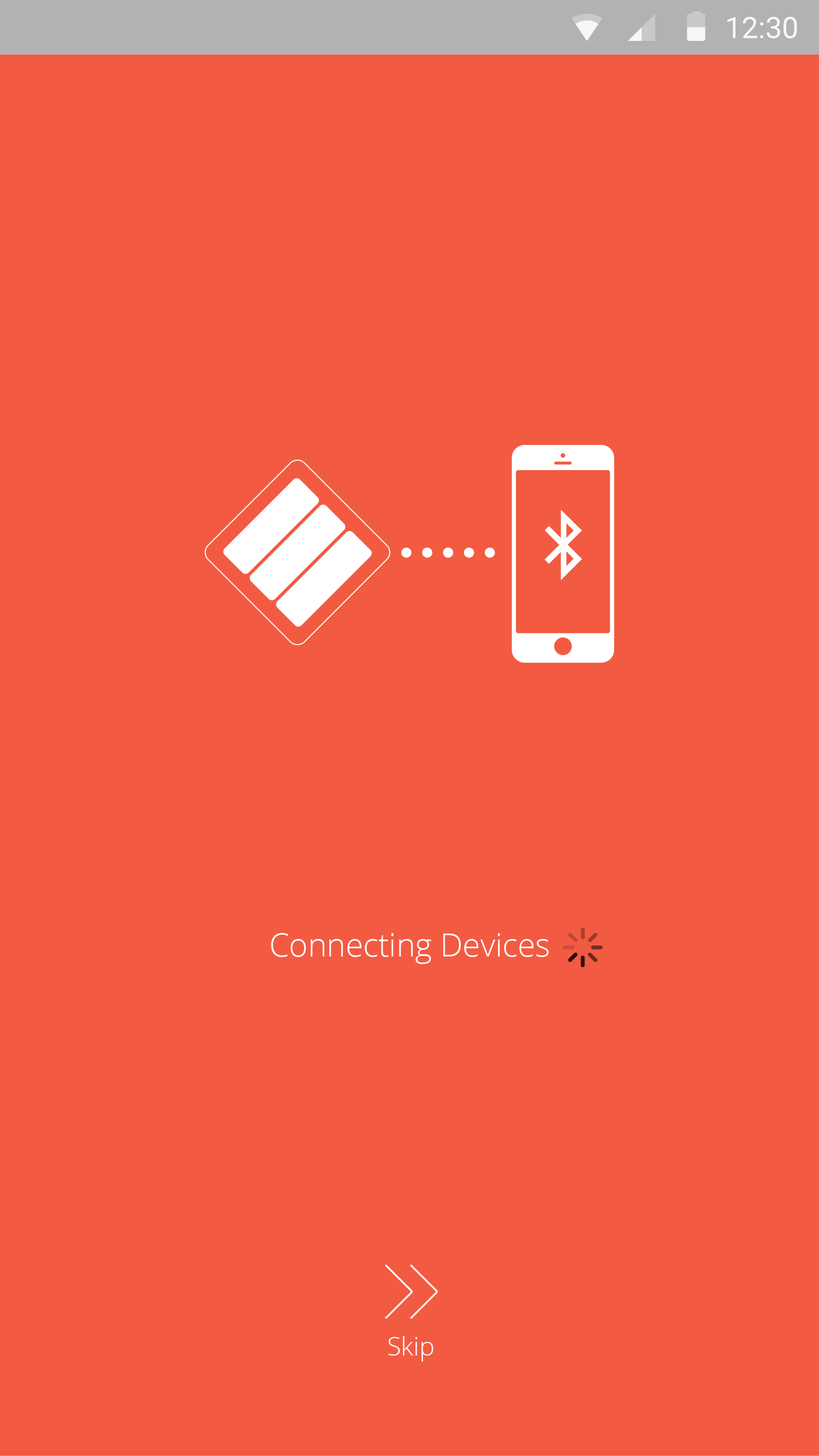
<style>
.page{position:relative;width:819px;height:1456px;background:#f25b42}
.page>*{position:absolute;margin:0}
.t1{font:32px "OpenSans-Light";color:#ffffff}
.t2{font:25.6px "OpenSans-Light";color:#ffffff}
</style>
<div class="page">
<p class="t1" style="left:271px;top:933px;width:278px;height:31px">Connecting Devices</p>
<p class="t2" style="left:388px;top:1336px;width:45px;height:26px">Skip</p>
</div>
